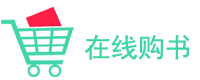
<style>
.page{position:relative;width:200px;height:80px;background:#ffffff}
.page>*{position:absolute;margin:0}
.t1{font:27px "SimHei";color:#3ed4a7}
</style>
<div class="page">
<p class="t1" style="left:84px;top:34px;width:106px;height:26px">在线购书</p>
</div>
